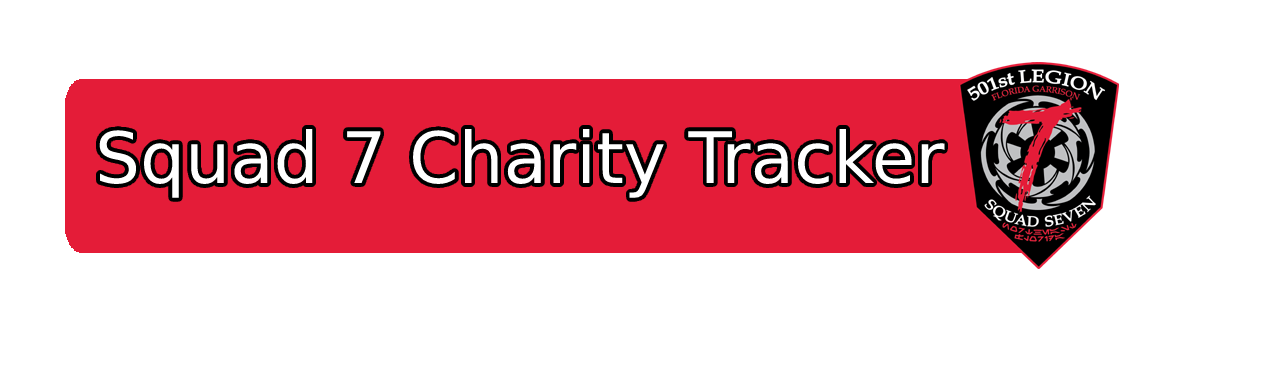
<style>
.page{position:relative;width:1274px;height:368px;background:#ffffff}
.page>*{position:absolute;margin:0}
.t1{font:71px "Bahnschrift";color:#ffffff}
</style>
<div class="page">
<p class="t1" style="left:99px;top:129px;width:846px;height:69px">Squad 7 Charity Tracker</p>
</div>
